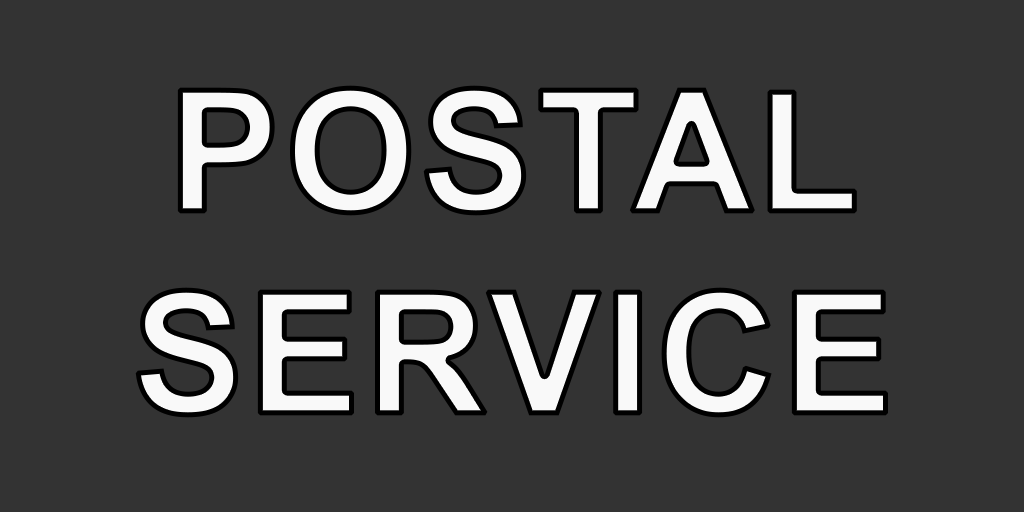
<style>
.page{position:relative;width:1024px;height:512px;background:#333333}
.page>*{position:absolute;margin:0}
.t1{font:168px "Arial-BoldMT";color:#f9f9f9;font-weight:bold}
</style>
<div class="page">
<p class="t1" style="left:135px;top:85px;width:753px;height:333px;text-align:center">POSTAL<br>SERVICE</p>
</div>
